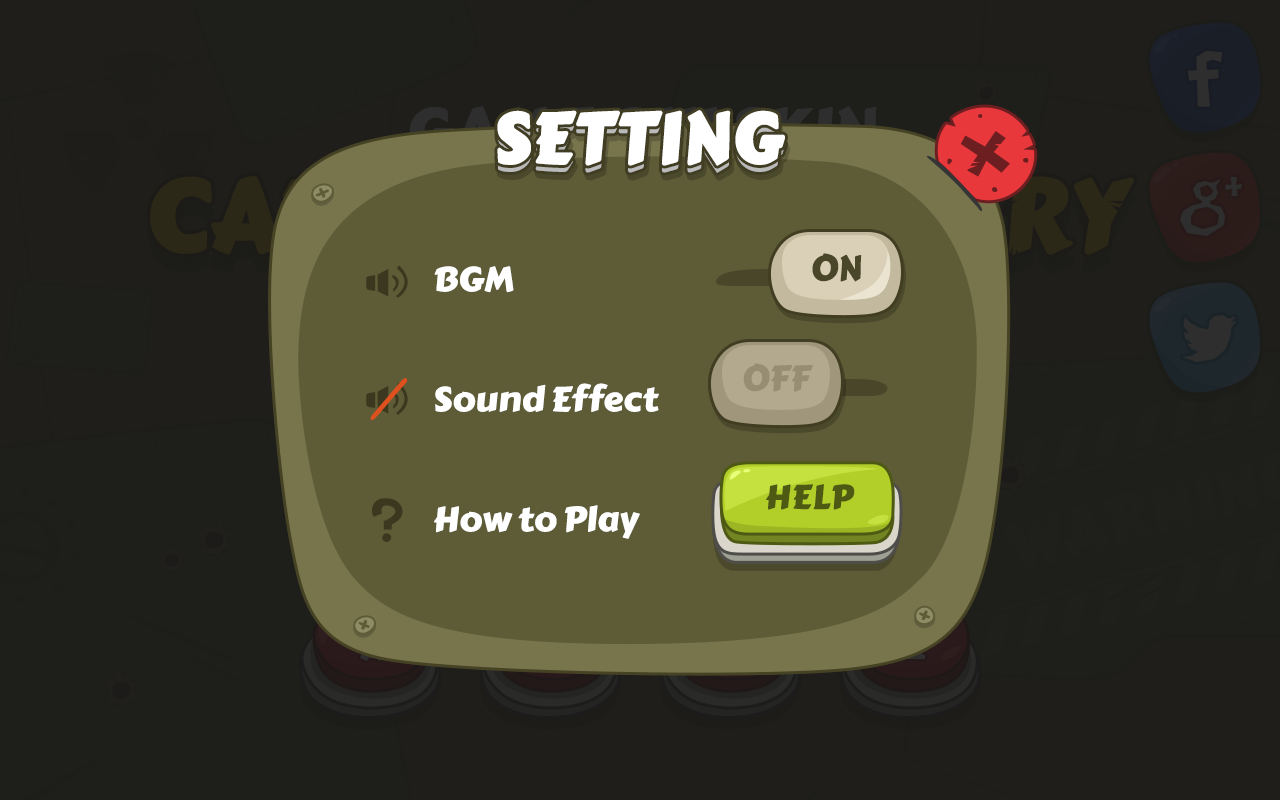
<style>
.page{position:relative;width:1280px;height:800px;background:#1f1e1b}
.page>*{position:absolute;margin:0}
.t1{font:70px "CarterOne";color:#ffffff;text-transform:uppercase;font-weight:bold}
.t2{font:35px "CarterOne";color:#494629;text-transform:uppercase}
.t3{font:34.2px/120px "CarterOne";letter-spacing:-0.025em;color:#ffffff;scale:1.06 1}
.t4{font:35px "CarterOne";color:#968d72;text-transform:uppercase}
.t5{font:33.2px "CarterOne";letter-spacing:-0.025em;color:#4e5a14;text-transform:uppercase;font-weight:bold;scale:1.05 1}
</style>
<div class="page">
<p class="t1" style="left:497px;top:110px;width:288px;height:56px">SETTING</p>
<p class="t1" style="left:497px;top:117px;width:288px;height:56px">SETTING</p>
<p class="t2" style="left:812px;top:253px;width:50px;height:29px">ON</p>
<p class="t3" style="left:434px;top:266px;width:225px;height:273px">BGM<br>Sound Effect<br>How to Play</p>
<p class="t4" style="left:743px;top:363px;width:70px;height:29px">OFF</p>
<p class="t5" style="left:766px;top:484px;width:89px;height:26px">HELP</p>
</div>
